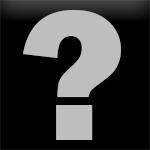
<style>
.page{position:relative;width:150px;height:150px;background:#000000}
.page>*{position:absolute;margin:0}
.t1{font:191.9px "FranklinGothic-Heavy";color:#bebebe}
</style>
<div class="page">
<p class="t1" style="left:22px;top:10px;width:99px;height:130px">?</p>
</div>
